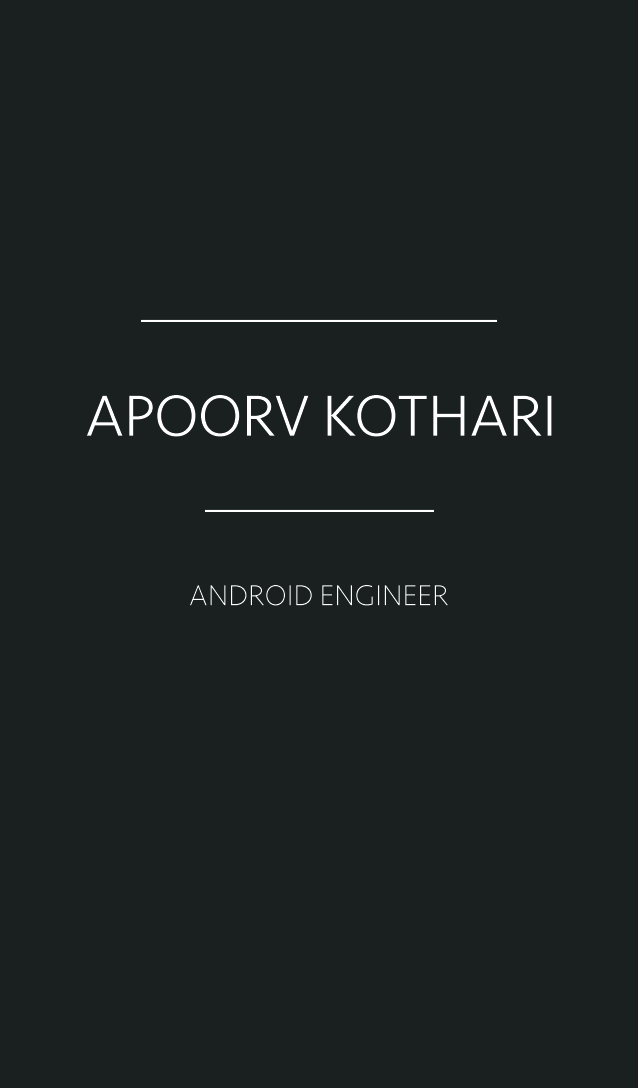
<style>
.page{position:relative;width:638px;height:1088px;background:#1a1f20}
.page>*{position:absolute;margin:0}
.t1{font:60px "Seravek-Light";color:#ffffff}
.t2{font:30px "Seravek-ExtraLight";color:#ffffff}
</style>
<div class="page">
<p class="t1" style="left:86px;top:395px;width:466px;height:42px">APOORV KOTHARI</p>
<p class="t2" style="left:190px;top:585px;width:258px;height:21px">ANDROID ENGINEER</p>
</div>
